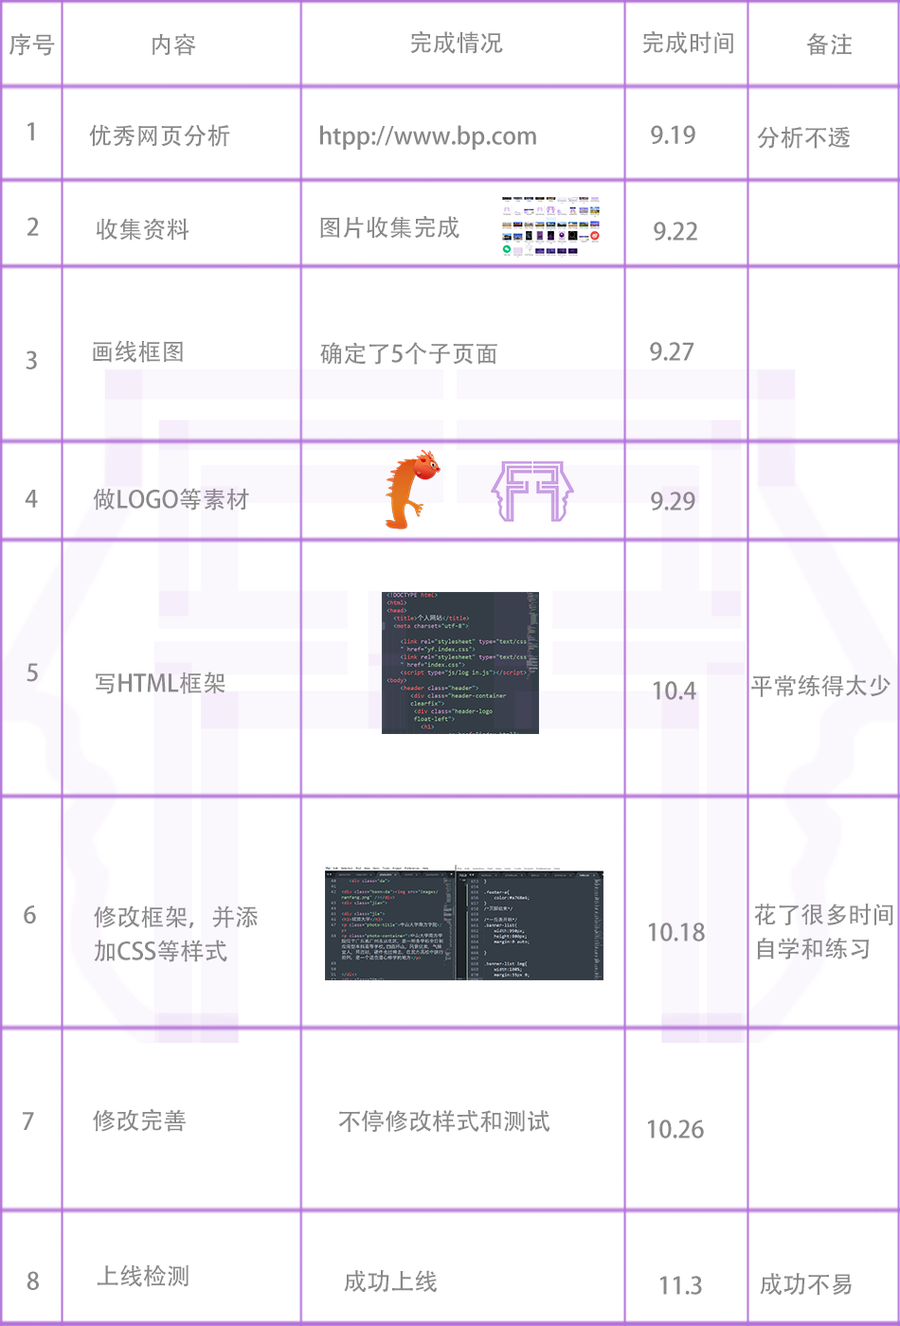
<style>
.page{position:relative;width:900px;height:1326px;background:#ffffff}
.page>*{position:absolute;margin:0}
.t1{font:23.7px "AdobeHeitiStd-Regular";color:#888888}
.t2{font:23.7px/17px "AdobeHeitiStd-Regular";color:#888888}
</style>
<div class="page">
<p class="t1" style="left:9px;top:33px;width:46px;height:23px">序号</p>
<p class="t1" style="left:152px;top:33px;width:44px;height:23px">内容</p>
<p class="t1" style="left:410px;top:31px;width:93px;height:23px">完成情况</p>
<p class="t1" style="left:642px;top:31px;width:91px;height:23px">完成时间</p>
<p class="t1" style="left:806px;top:33px;width:45px;height:23px">备注</p>
<p class="t1" style="left:27px;top:122px;width:7px;height:19px">1</p>
<p class="t1" style="left:89px;top:124px;width:141px;height:23px">优秀网页分析</p>
<p class="t1" style="left:320px;top:125px;width:216px;height:25px">htpp://www.bp.com</p>
<p class="t1" style="left:651px;top:125px;width:44px;height:19px">9.19</p>
<p class="t1" style="left:757px;top:126px;width:93px;height:23px">分析不透</p>
<p class="t1" style="left:27px;top:217px;width:12px;height:19px">2</p>
<p class="t1" style="left:96px;top:218px;width:93px;height:23px">收集资料</p>
<p class="t1" style="left:320px;top:216px;width:139px;height:23px">图片收集完成</p>
<p class="t1" style="left:653px;top:222px;width:44px;height:19px">9.22</p>
<p class="t1" style="left:93px;top:340px;width:90px;height:23px">画线框图</p>
<p class="t1" style="left:320px;top:342px;width:177px;height:23px">确定了5个子页面</p>
<p class="t1" style="left:650px;top:342px;width:44px;height:19px">9.27</p>
<p class="t1" style="left:26px;top:350px;width:11px;height:19px">3</p>
<p class="t1" style="left:25px;top:490px;width:13px;height:18px">4</p>
<p class="t1" style="left:93px;top:488px;width:156px;height:22px">做LOGO等素材</p>
<p class="t1" style="left:651px;top:491px;width:44px;height:19px">9.29</p>
<p class="t1" style="left:27px;top:663px;width:11px;height:19px">5</p>
<p class="t1" style="left:96px;top:671px;width:129px;height:23px">写HTML框架</p>
<p class="t1" style="left:751px;top:674px;width:139px;height:23px">平常练得太少</p>
<p class="t1" style="left:652px;top:681px;width:44px;height:19px">10.4</p>
<p class="t1" style="left:24px;top:905px;width:12px;height:19px">6</p>
<p class="t2" style="left:94px;top:905px;width:164px;height:57px">修改框架，并添<br><br>加CSS等样式</p>
<p class="t2" style="left:754px;top:902px;width:139px;height:57px">花了很多时间<br><br>自学和练习</p>
<p class="t1" style="left:648px;top:922px;width:56px;height:19px">10.18</p>
<p class="t1" style="left:93px;top:1109px;width:93px;height:23px">修改完善</p>
<p class="t1" style="left:338px;top:1110px;width:212px;height:22px">不停修改样式和测试</p>
<p class="t1" style="left:23px;top:1112px;width:11px;height:18px">7</p>
<p class="t1" style="left:647px;top:1119px;width:57px;height:19px">10.26</p>
<p class="t1" style="left:97px;top:1264px;width:91px;height:23px">上线检测</p>
<p class="t1" style="left:27px;top:1271px;width:12px;height:19px">8</p>
<p class="t1" style="left:344px;top:1269px;width:93px;height:23px">成功上线</p>
<p class="t1" style="left:659px;top:1275px;width:43px;height:19px">11.3</p>
<p class="t1" style="left:759px;top:1272px;width:92px;height:23px">成功不易</p>
</div>
